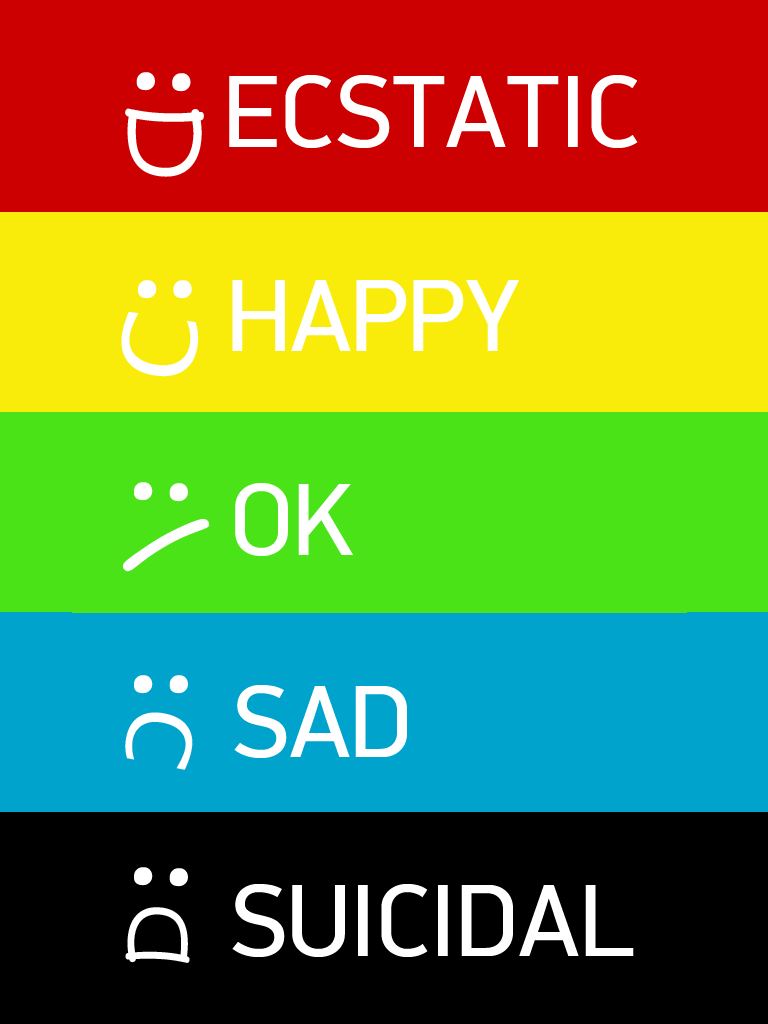
<style>
.page{position:relative;width:768px;height:1024px}
.page>*{position:absolute;margin:0}
.t1{font:118.9px "KristenITC-Regular";color:#ffffff}
.t2{font:102.6px "PFDinDisplayPro-Regular";color:#ffffff}
.t3{font:85.2px "KristenITC-Regular";color:#ffffff}
.t4{font:100.7px "LucidaSansUnicode";color:#ffffff}
.t5{font:109.7px "KristenITC-Regular";color:#ffffff}
.t6{font:87.8px "LucidaSansUnicode";color:#ffffff}
.t7{font:69.4px "KristenITC-Regular";color:#ffffff}
</style>
<div class="page">
<p class="t1" style="left:136px;top:72px;width:55px;height:20px;rotate:-179deg">..</p>
<p class="t2" style="left:229px;top:75px;width:409px;height:73px">ECSTATIC</p>
<p class="t3" style="left:125px;top:108px;width:79px;height:69px;rotate:93deg">D</p>
<p class="t1" style="left:138px;top:280px;width:54px;height:19px;rotate:-179deg">..</p>
<p class="t2" style="left:232px;top:280px;width:287px;height:71px">HAPPY</p>
<p class="t4" style="left:121px;top:311px;width:78px;height:66px;rotate:-81deg">C</p>
<p class="t1" style="left:134px;top:482px;width:54px;height:20px;rotate:-179deg">..</p>
<p class="t2" style="left:235px;top:483px;width:118px;height:73px">OK</p>
<p class="t5" style="left:123px;top:519px;width:87px;height:53px;rotate:43deg">/</p>
<p class="t1" style="left:134px;top:675px;width:54px;height:19px;rotate:-179deg">..</p>
<p class="t2" style="left:234px;top:685px;width:173px;height:73px">SAD</p>
<p class="t6" style="left:125px;top:712px;width:68px;height:58px;rotate:101deg">C</p>
<p class="t1" style="left:134px;top:867px;width:54px;height:20px;rotate:-179deg">..</p>
<p class="t2" style="left:232px;top:884px;width:402px;height:73px">SUICIDAL</p>
<p class="t7" style="left:125px;top:907px;width:65px;height:56px;rotate:-87deg">D</p>
</div>
